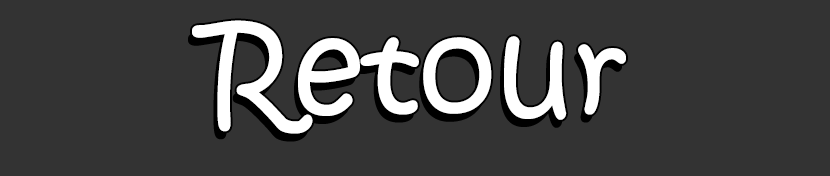
<style>
.page{position:relative;width:830px;height:176px;background:#333333}
.page>*{position:absolute;margin:0}
.t1{font:124.4px "KristenITC-Regular";color:#ffffff}
</style>
<div class="page">
<p class="t1" style="left:192px;top:20px;width:434px;height:114px">Retour</p>
</div>
